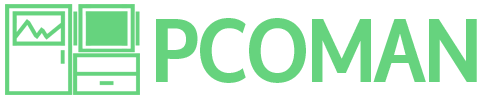
<style>
.page{position:relative;width:500px;height:100px;background:#ffffff}
.page>*{position:absolute;margin:0}
.t1{font:89.1px "Oxygen-Bold";letter-spacing:-0.02em;color:#66d37e;scale:0.91 1}
</style>
<div class="page">
<p class="t1" style="left:156px;top:18px;width:321px;height:65px">PCOMAN</p>
</div>
